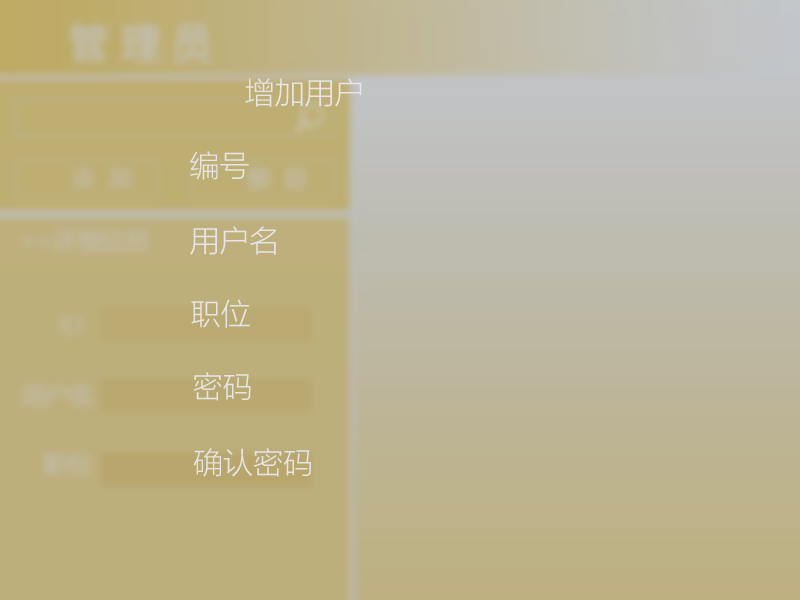
<style>
.page{position:relative;width:800px;height:600px}
.page>*{position:absolute;margin:0}
.t1{font:30px "MicrosoftYaHeiLight";color:#e6e6e6}
</style>
<div class="page">
<p class="t1" style="left:245px;top:78px;width:117px;height:29px">增加用户</p>
<p class="t1" style="left:190px;top:151px;width:59px;height:29px">编号</p>
<p class="t1" style="left:190px;top:226px;width:86px;height:29px">用户名</p>
<p class="t1" style="left:191px;top:299px;width:59px;height:29px">职位</p>
<p class="t1" style="left:193px;top:372px;width:58px;height:29px">密码</p>
<p class="t1" style="left:193px;top:448px;width:118px;height:29px">确认密码</p>
</div>
